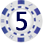
<style>
.page{position:relative;width:43px;height:43px;background:#ffffff}
.page>*{position:absolute;margin:0}
.t1{font:24px "MicrosoftYaHei";color:#00024b;font-weight:bold}
</style>
<div class="page">
<p class="t1" style="left:16px;top:11px;width:11px;height:20px">5</p>
</div>
